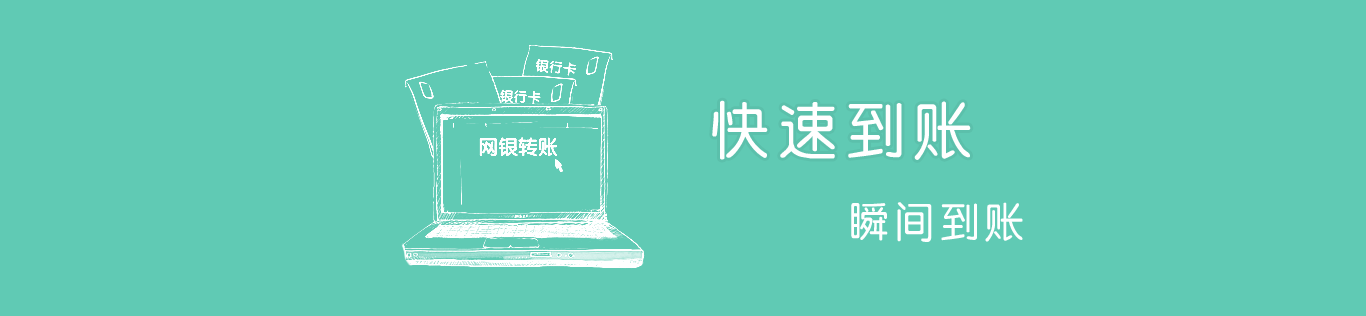
<style>
.page{position:relative;width:1366px;height:316px;background:#60cab4}
.page>*{position:absolute;margin:0}
.t1{font:64px "CTZhongYuanSJ";letter-spacing:0.055em;color:#ffffff}
.t2{font:42.8px "CTZhongYuanSJ";letter-spacing:0.055em;color:#ffffff}
</style>
<div class="page">
<p class="t1" style="left:712px;top:100px;width:259px;height:60px">快速到账</p>
<p class="t2" style="left:851px;top:202px;width:172px;height:40px">瞬间到账</p>
</div>
